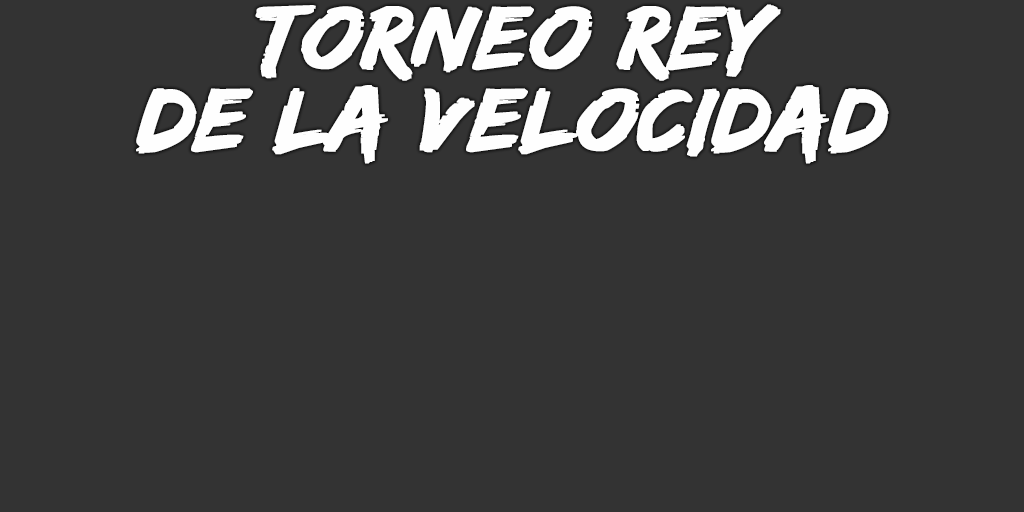
<style>
.page{position:relative;width:1024px;height:512px;background:#333333}
.page>*{position:absolute;margin:0}
.t1{font:93px/82px "EdoSZ";color:#fefefe;font-weight:bold;font-style:italic;scale:1.04 1}
</style>
<div class="page">
<p class="t1" style="left:136px;top:4px;width:753px;height:160px;text-align:center">torneo rey<br>de la velocidad</p>
</div>
